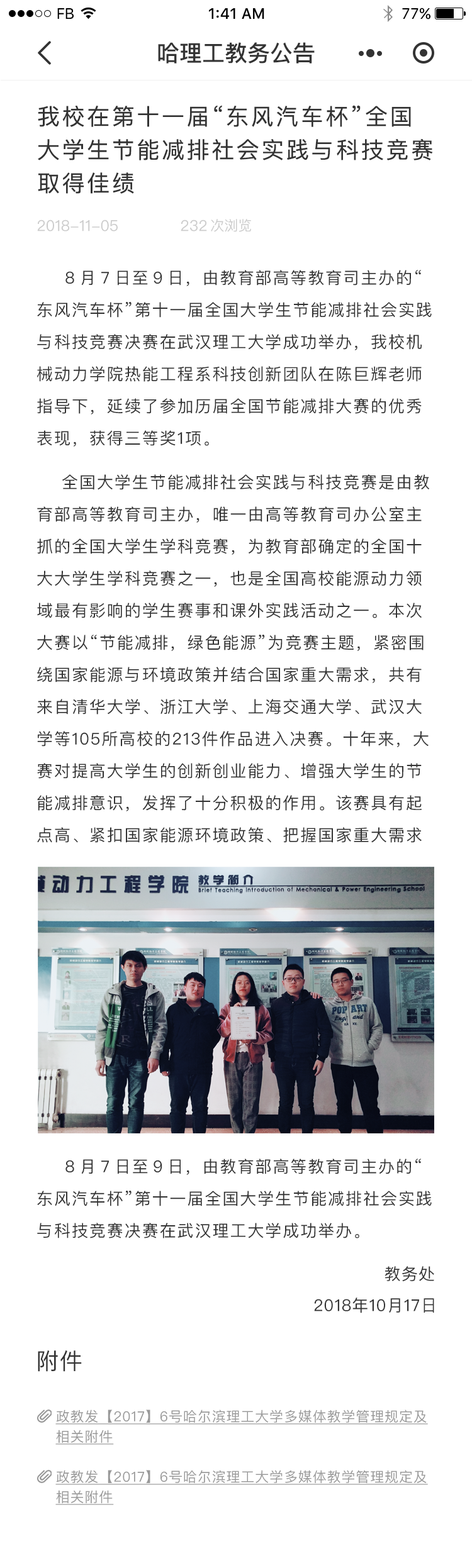
<style>
.page{position:relative;width:472px;height:1568px;background:#ffffff}
.page>*{position:absolute;margin:0}
.t1{font:15.1px "SFUIText-Regular";letter-spacing:-0.025em;color:#000000}
.t2{font:15.1px "SFUIText-Medium";color:#000000}
.t3{font:15.1px "SFUIText-Regular";color:#000000}
.t4{font:22.6px "PingFangSC-Medium";color:#333333}
.t5{font:22.6px/33.3px "PingFangSC-Regular";letter-spacing:0.1em;color:#333333}
.t6{font:15.1px "PingFangSC-Regular";color:#cccccc}
.t7{font:13.8px "PingFangSC-Regular";color:#cccccc}
.t8{font:16.4px/32.1px "PingFangSC-Regular";letter-spacing:0.075em;color:#333333}
.t9{font:16.4px "PingFangSC-Regular";letter-spacing:0.04em;color:#333333}
.t10{font:22.6px "PingFangSC-Regular";letter-spacing:0.04em;color:#333333}
.t11{font:13.8px/20.1px "PingFangSC-Regular";letter-spacing:0.04em;color:#999999;text-decoration:underline}
</style>
<div class="page">
<p class="t1" style="left:57px;top:8px;width:17px;height:11px">FB</p>
<p class="t2" style="left:209px;top:8px;width:55px;height:11px">1:41 AM</p>
<p class="t3" style="left:402px;top:8px;width:28px;height:11px">77%</p>
<p class="t4" style="left:158px;top:42px;width:156px;height:22px">哈理工教务公告</p>
<p class="t5" style="left:38px;top:105px;width:395px;height:89px">我校在第十一届“东风汽车杯”全国大学生节能减排社会实践与科技竞赛取得佳绩</p>
<p class="t6" style="left:37px;top:220px;width:81px;height:11px">2018-11-05</p>
<p class="t6" style="left:181px;top:220px;width:26px;height:11px">232</p>
<p class="t7" style="left:211px;top:219px;width:40px;height:13px">次浏览</p>
<p class="t8" style="left:37px;top:270px;width:394px;height:573px">８月７日至９日，由教育部高等教育司主办的“东风汽车杯”第十一届全国大学生节能减排社会实践与科技竞赛决赛在武汉理工大学成功举办，我校机械动力学院热能工程系科技创新团队在陈巨辉老师指导下，延续了参加历届全国节能减排大赛的优秀表现，获得三等奖1项。<br>全国大学生节能减排社会实践与科技竞赛是由教育部高等教育司主办，唯一由高等教育司办公室主抓的全国大学生学科竞赛，为教育部确定的全国十大大学生学科竞赛之一，也是全国高校能源动力领域最有影响的学生赛事和课外实践活动之一。本次大赛以“节能减排，绿色能源”为竞赛主题，紧密围绕国家能源与环境政策并结合国家重大需求，共有来自清华大学、浙江大学、上海交通大学、武汉大学等105所高校的213件作品进入决赛。十年来，大赛对提高大学生的创新创业能力、增强大学生的节能减排意识，发挥了十分积极的作用。该赛具有起点高、紧扣国家能源环境政策、把握国家重大需求</p>
<p class="t8" style="left:37px;top:1159px;width:394px;height:79px">８月７日至９日，由教育部高等教育司主办的“东风汽车杯”第十一届全国大学生节能减排社会实践与科技竞赛决赛在武汉理工大学成功举办。</p>
<p class="t9" style="left:384px;top:1266px;width:50px;height:16px">教务处</p>
<p class="t9" style="left:314px;top:1298px;width:120px;height:15px">2018年10月17日</p>
<p class="t10" style="left:38px;top:1350px;width:44px;height:22px">附件</p>
<p class="t11" style="left:55px;top:1410px;width:373px;height:35px">政教发【2017】6号哈尔滨理工大学多媒体教学管理规定及相关附件</p>
<p class="t11" style="left:55px;top:1470px;width:373px;height:35px">政教发【2017】6号哈尔滨理工大学多媒体教学管理规定及相关附件</p>
</div>
